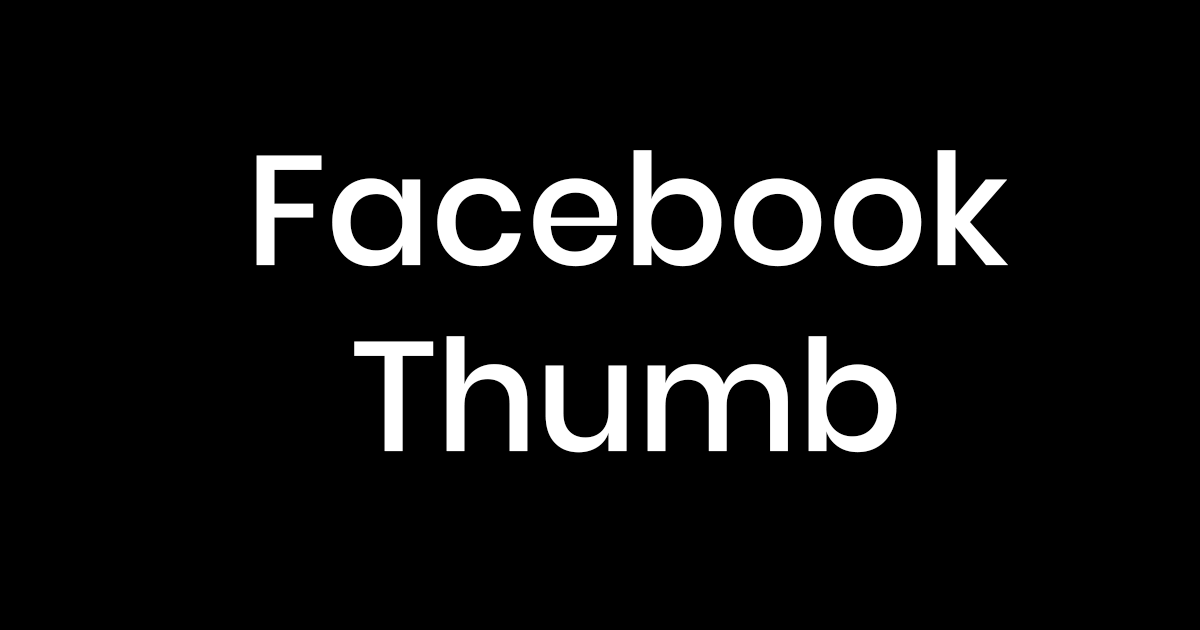
<style>
.page{position:relative;width:1200px;height:630px;background:#000000}
.page>*{position:absolute;margin:0}
.t1{font:155px "Poppins-Medium";color:#ffffff}
</style>
<div class="page">
<p class="t1" style="left:256px;top:150px;width:752px;height:303px;text-align:center">Facebook<br>Thumb</p>
</div>
